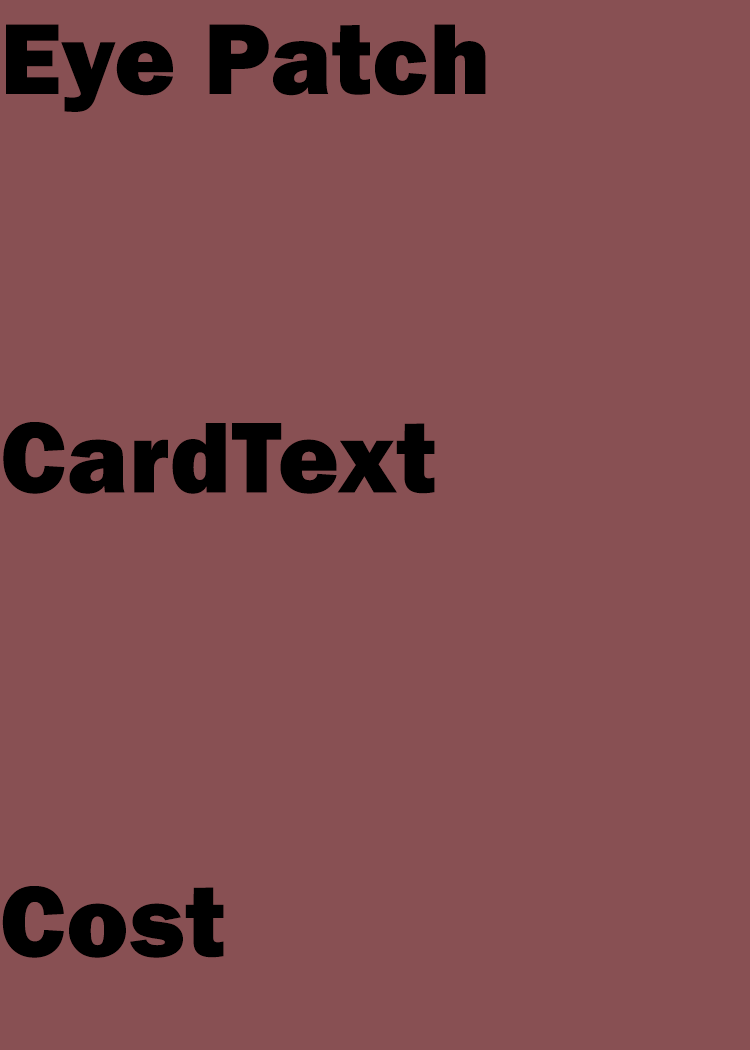
<style>
.page{position:relative;width:750px;height:1050px;background:#885053}
.page>*{position:absolute;margin:0}
.t1{font:104.2px "FranklinGothic-Heavy";letter-spacing:0.01em;color:#000000}
</style>
<div class="page">
<p class="t1" style="left:6px;top:24px;width:480px;height:88px">Eye Patch</p>
<p class="t1" style="left:3px;top:422px;width:432px;height:72px">CardText</p>
<p class="t1" style="left:2px;top:886px;width:222px;height:72px">Cost</p>
</div>
